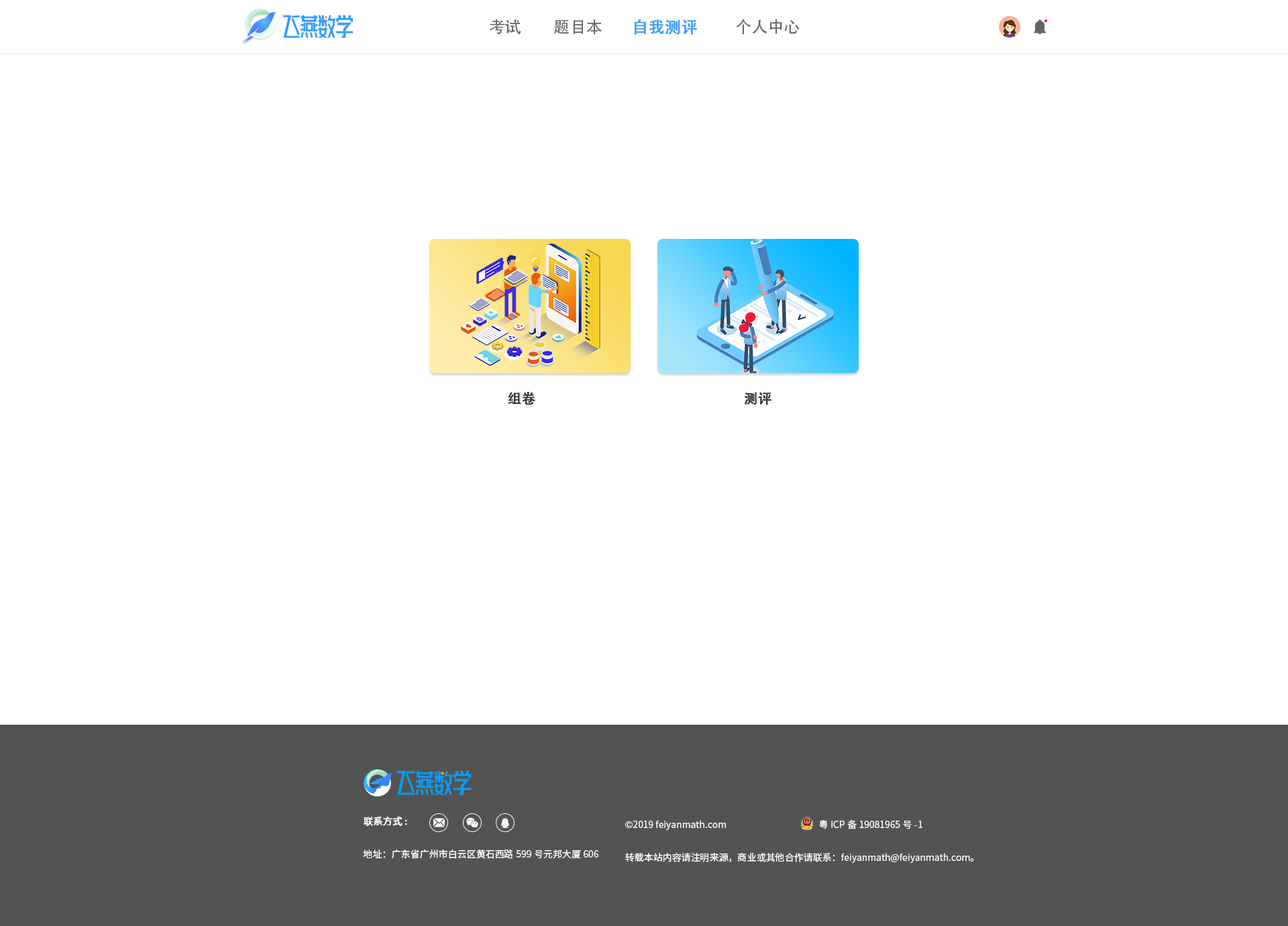
<style>
.page{position:relative;width:1288px;height:926px;background:#ffffff}
.page>*{position:absolute;margin:0}
.t1{font:16.1px "AdobeHeitiStd-Regular";color:#666666}
.t2{font:16.1px "AdobeHeitiStd-Regular";color:#409eff;font-weight:bold}
.t3{font:13.4px "AdobeHeitiStd-Regular";color:#333333;font-weight:bold}
.t4{font:9.4px "SourceHanSansCN-Normal";color:#ffffff}
.t5{font:9.4px "SourceHanSansCN-Normal";color:#ffffff;font-weight:bold}
</style>
<div class="page">
<p class="t1" style="left:489px;top:19px;width:32px;height:15px">考试</p>
<p class="t1" style="left:553px;top:19px;width:49px;height:15px">题目本</p>
<p class="t2" style="left:634px;top:19px;width:63px;height:16px">自我测评</p>
<p class="t1" style="left:736px;top:19px;width:64px;height:15px">个人中心</p>
<p class="t3" style="left:508px;top:391px;width:27px;height:14px">组卷</p>
<p class="t3" style="left:744px;top:392px;width:27px;height:13px">测评</p>
<p class="t4" style="left:363px;top:816px;width:235px;height:43px"><span class="t5">联系方式:<br><br></span>地址：广东省广州市白云区黄石西路599号元邦大厦606</p>
<p class="t4" style="left:625px;top:820px;width:349px;height:43px">©2019 feiyanmath.com                                            粤ICP备19081965号-1<br><br>转载本站内容请注明来源，商业或其他合作请联系：feiyanmath@feiyanmath.com。</p>
</div>
